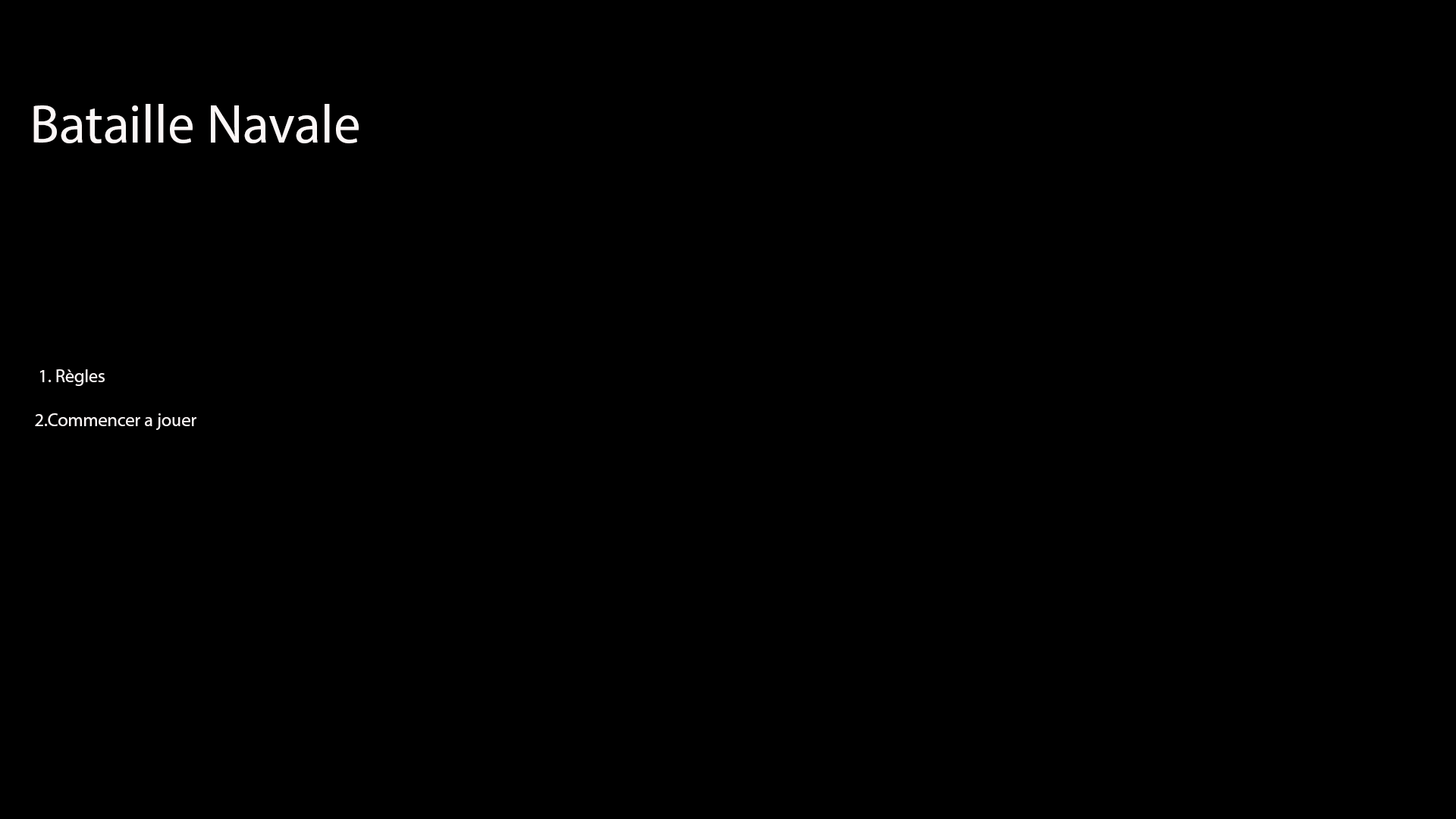
<style>
.page{position:relative;width:1456px;height:819px;background:#000000}
.page>*{position:absolute;margin:0}
.t1{font:54.6px "MyriadPro-Regular";color:#fcf7f7}
.t2{font:18.2px "MyriadPro-Regular";color:#fcf7f7}
</style>
<div class="page">
<p class="t1" style="left:33px;top:104px;width:326px;height:39px">Bataille Navale</p>
<p class="t2" style="left:35px;top:369px;width:161px;height:61px">1. Règles<br><br>2.Commencer a jouer</p>
</div>
